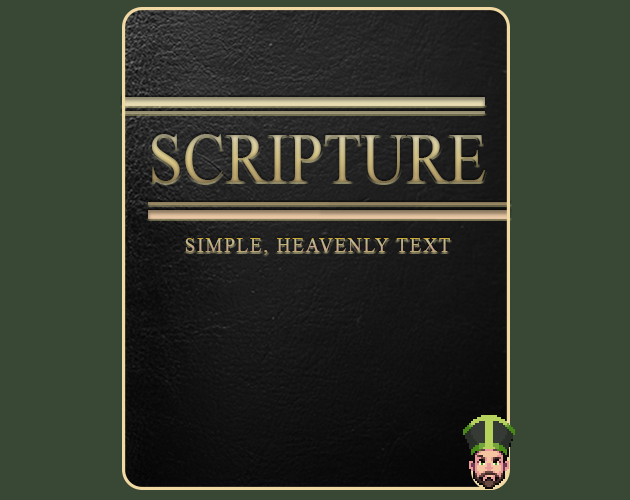
<style>
.page{position:relative;width:630px;height:500px;background:#384835}
.page>*{position:absolute;margin:0}
.t1{font:70px "TimesNewRomanPSMT";scale:0.9 1}
.t2{font:21px "TimesNewRomanPSMT";letter-spacing:0.105em;text-transform:uppercase;scale:0.9 1}
.t3{font:21px "TimesNewRomanPSMT";letter-spacing:0.105em;scale:0.9 1}
</style>
<div class="page">
<p class="t1" style="left:151px;top:134px;width:335px;height:49px">SCRIPTURE</p>
<p class="t2" style="left:185px;top:238px;width:265px;height:17px"><span class="t3">S</span>imple, Heavenly Text</p>
</div>
